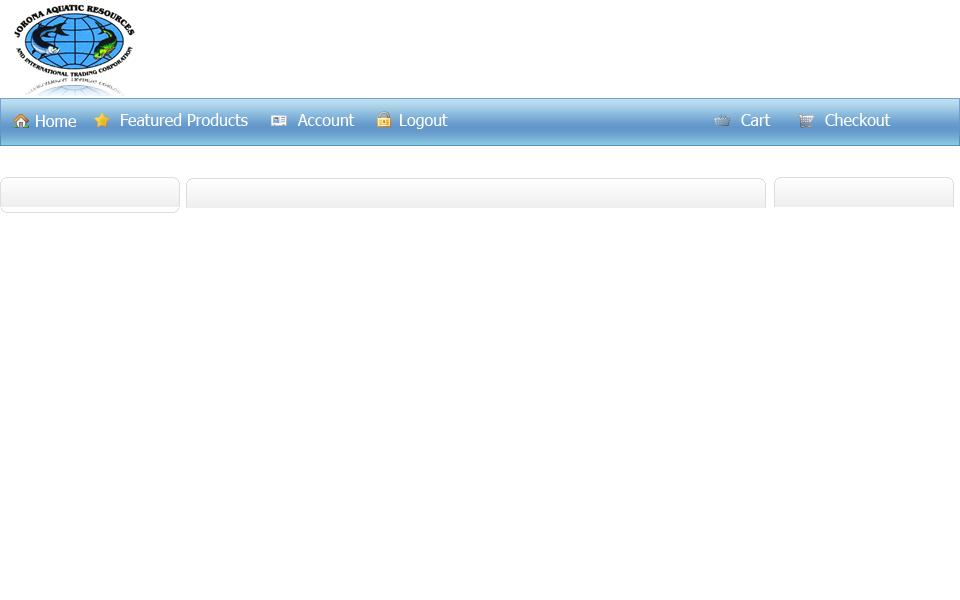
<style>
.page{position:relative;width:960px;height:600px;background:#ffffff}
.page>*{position:absolute;margin:0}
.t1{font:16px "Tahoma";color:#ffffff}
</style>
<div class="page">
<p class="t1" style="left:121px;top:113px;width:127px;height:13px">Featured Products</p>
<p class="t1" style="left:825px;top:113px;width:66px;height:13px">Checkout</p>
<p class="t1" style="left:36px;top:115px;width:41px;height:12px">Home</p>
<p class="t1" style="left:297px;top:114px;width:58px;height:12px">Account</p>
<p class="t1" style="left:400px;top:114px;width:48px;height:15px">Logout</p>
<p class="t1" style="left:741px;top:114px;width:30px;height:12px">Cart</p>
</div>
